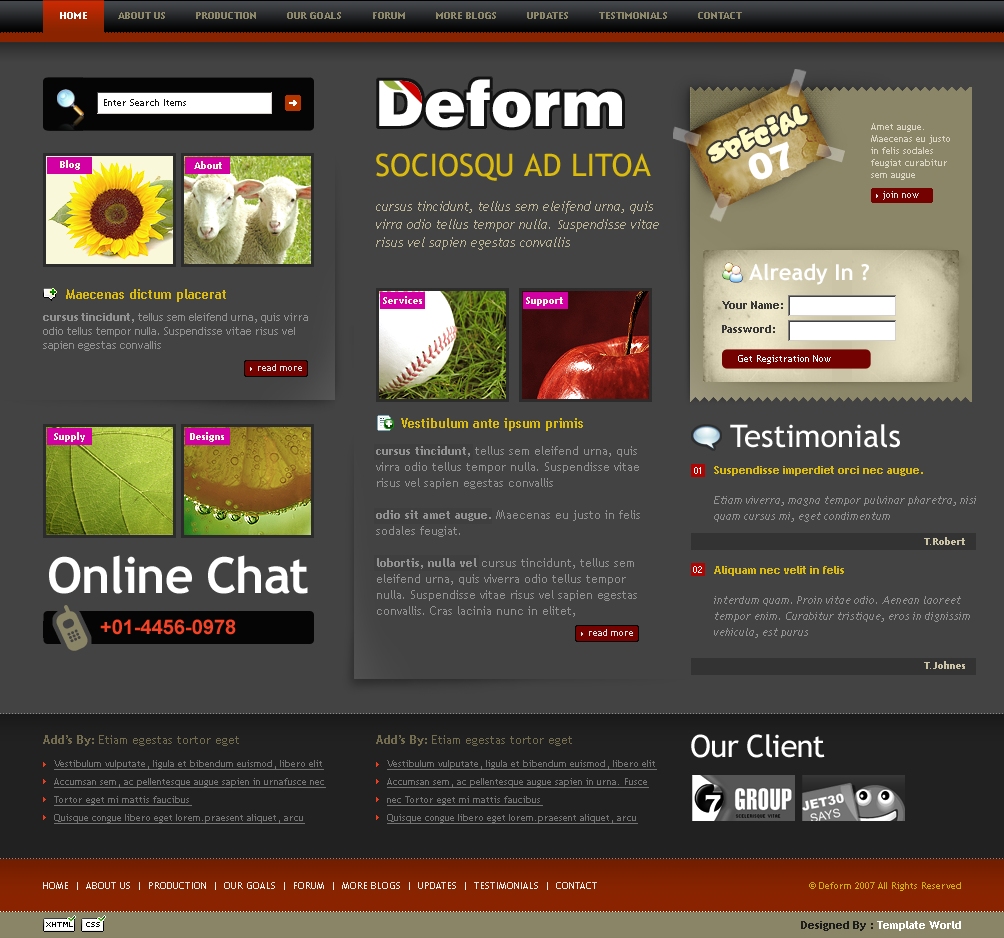
<style>
.page{position:relative;width:1004px;height:938px;background:#434343}
.page>*{position:absolute;margin:0}
.t1{font:10px "TrebuchetMS-Bold";color:#8d8769;text-transform:uppercase}
.t2{font:10px "TrebuchetMS-Bold";color:#ffffff;text-transform:uppercase}
.t3{font:63px "Swiss721BT-Black";color:#ffffff}
.t4{font:10px "TrebuchetMS";color:#101010}
.t5{font:24.2px "Vitamin";color:#fffcc6}
.t6{font:10px/12px "TrebuchetMS";color:#dad6c3}
.t7{font:36px "Swiss721BT-Black";color:#ffffff}
.t8{font:10px "TrebuchetMS-Bold";color:#f9f8da}
.t9{font:31px "TrebuchetMS";color:#dbbb0d;text-transform:uppercase}
.t10{font:9px "TrebuchetMS";color:#e5e5e5}
.t11{font:13px/18px "TrebuchetMS-Italic";color:#bdb698}
.t12{font:22px "TrebuchetMS-Bold";color:#ffffff}
.t13{font:13px "TrebuchetMS-Bold";color:#dbbb0d}
.t14{font:11px/12px "TrebuchetMS-Bold";color:#383838}
.t15{font:11px/14px "TrebuchetMS";color:#929292}
.t16{font:11px/14px "TrebuchetMS-Bold";color:#929292}
.t17{font:10px "TrebuchetMS";color:#ffffff}
.t18{font:31px "TrebuchetMS";color:#ffffff}
.t19{font:12px/16px "TrebuchetMS";color:#929292}
.t20{font:12px/16px "TrebuchetMS-Bold";color:#929292}
.t21{font:8px "Standard0757";color:#ffffff}
.t22{font:11px/16px "TrebuchetMS-Italic";color:#929292}
.t23{font:11px/14px "TrebuchetMS-Bold";color:#dbbb0d}
.t24{font:10px "TrebuchetMS-Bold";color:#c9c2a4}
.t25{font:50px "TrebuchetMS-Bold";letter-spacing:-0.025em;color:#ffffff}
.t26{font:50px "Cellpic";letter-spacing:-0.025em;color:#8b8567}
.t27{font:20px "Arial-BoldMT";color:#f64325}
.t28{font:12px "TrebuchetMS";color:#736c4e}
.t29{font:12px "TrebuchetMS-Bold";color:#736c4e}
.t30{font:31px "TrebuchetMS";letter-spacing:-0.025em;color:#ffffff}
.t31{font:10px/18px "TrebuchetMS";color:#747474;text-decoration:underline}
.t32{font:10px "TrebuchetMS";color:#efe9e7;text-transform:uppercase}
.t33{font:10px "TrebuchetMS";color:#dbbb0d}
</style>
<div class="page">
<p class="t1" style="left:60px;top:12px;width:682px;height:7px"><span class="t2">Home</span>          About Us          Production          Our Goals          Forum          More Blogs          Updates          Testimonials          Contact</p>
<p class="t3" style="left:379px;top:79px;width:243px;height:49px">Deform</p>
<p class="t4" style="left:104px;top:99px;width:82px;height:7px">Enter Search Items</p>
<p class="t5" style="left:708px;top:106px;width:100px;height:56px;rotate:-26deg">special</p>
<p class="t6" style="left:871px;top:123px;width:79px;height:57px">Amet augue. Maecenas eu justo in felis sodales feugiat curabitur sem augue</p>
<p class="t7" style="left:748px;top:141px;width:42px;height:39px;rotate:-21deg">07</p>
<p class="t8" style="left:60px;top:160px;width:20px;height:10px">Blog</p>
<p class="t8" style="left:194px;top:161px;width:28px;height:8px">About</p>
<p class="t9" style="left:376px;top:153px;width:275px;height:28px">sociosqu ad litoa</p>
<p class="t10" style="left:883px;top:191px;width:36px;height:9px">join now</p>
<p class="t11" style="left:376px;top:201px;width:283px;height:49px">cursus tincidunt, tellus sem eleifend urna, quis virra odio tellus tempor nulla. Suspendisse vitae risus vel sapien egestas convallis</p>
<p class="t12" style="left:749px;top:263px;width:120px;height:22px">Already In ?</p>
<p class="t13" style="left:66px;top:289px;width:160px;height:13px">Maecenas dictum placerat</p>
<p class="t8" style="left:383px;top:296px;width:39px;height:8px">Services</p>
<p class="t8" style="left:526px;top:297px;width:37px;height:9px">Support</p>
<p class="t14" style="left:722px;top:301px;width:61px;height:32px">Your Name:<br><br>Password:</p>
<p class="t15" style="left:43px;top:313px;width:265px;height:38px"><span class="t16">cursus tincidunt,</span> tellus sem eleifend urna, quis virra odio tellus tempor nulla. Suspendisse vitae risus vel sapien egestas convallis</p>
<p class="t10" style="left:258px;top:364px;width:44px;height:7px">read more</p>
<p class="t17" style="left:738px;top:355px;width:93px;height:9px">Get Registration Now</p>
<p class="t13" style="left:401px;top:418px;width:182px;height:13px">Vestibulum ante ipsum primis</p>
<p class="t18" style="left:730px;top:424px;width:170px;height:24px">Testimonials</p>
<p class="t8" style="left:54px;top:432px;width:31px;height:10px">Supply</p>
<p class="t8" style="left:190px;top:432px;width:34px;height:10px">Designs</p>
<p class="t19" style="left:376px;top:446px;width:264px;height:171px"><span class="t20">cursus tincidunt,</span> tellus sem eleifend urna, quis virra odio tellus tempor nulla. Suspendisse vitae risus vel sapien egestas convallis<br><span class="t20"><br>odio sit amet augue.</span> Maecenas eu justo in felis sodales feugiat.<br><br><span class="t20">lobortis, nulla vel </span>cursus tincidunt, tellus sem eleifend urna, quis viverra odio tellus tempor nulla. Suspendisse vitae risus vel sapien egestas convallis. Cras lacinia nunc in elitet,</p>
<p class="t21" style="left:694px;top:467px;width:7px;height:7px">01</p>
<p class="t22" style="left:714px;top:466px;width:262px;height:56px"><span class="t23">Suspendisse imperdiet orci nec augue.<br><br></span>Etiam viverra, magna tempor pulvinar pharetra, nisi quam cursus mi, eget condimentum</p>
<p class="t24" style="left:924px;top:537px;width:41px;height:8px">T.Robert</p>
<p class="t25" style="left:49px;top:555px;width:259px;height:39px">Online Chat</p>
<p class="t21" style="left:693px;top:566px;width:9px;height:7px">02</p>
<p class="t22" style="left:714px;top:566px;width:256px;height:72px"><span class="t23">Aliquam nec velit in felis<br><br></span>interdum quam. Proin vitae odio. Aenean laoreet tempor enim. Curabitur tristique, eros in dignissim vehicula, est purus</p>
<p class="t26" style="left:56px;top:605px;width:32px;height:46px;rotate:-25deg">b</p>
<p class="t27" style="left:100px;top:619px;width:136px;height:16px">+01-4456-0978</p>
<p class="t10" style="left:589px;top:629px;width:44px;height:7px">read more</p>
<p class="t24" style="left:924px;top:661px;width:41px;height:8px">T.Johnes</p>
<p class="t28" style="left:43px;top:735px;width:196px;height:11px"><span class="t29">Add’s By: </span>Etiam egestas tortor eget</p>
<p class="t28" style="left:376px;top:735px;width:196px;height:11px"><span class="t29">Add’s By: </span>Etiam egestas tortor eget</p>
<p class="t30" style="left:691px;top:734px;width:134px;height:24px">Our Client</p>
<p class="t31" style="left:54px;top:760px;width:272px;height:64px">Vestibulum vulputate, ligula et bibendum euismod, libero elit Accumsan sem, ac pellentesque augue sapien in urnafusce nec Tortor eget mi mattis faucibus<br>Quisque congue libero eget lorem.praesent aliquet, arcu</p>
<p class="t31" style="left:387px;top:760px;width:270px;height:64px">Vestibulum vulputate, ligula et bibendum euismod, libero elit Accumsan sem, ac pellentesque augue sapien in urna. Fusce nec Tortor eget mi mattis faucibus<br>Quisque congue libero eget lorem.praesent aliquet, arcu</p>
<p class="t32" style="left:43px;top:882px;width:554px;height:8px">Home  |  About Us  |  Production  |  Our Goals  |  Forum  |  More Blogs  |  Updates  |  Testimonials  |  Contact</p>
<p class="t33" style="left:809px;top:882px;width:152px;height:9px">© Deform 2007 All Rights Reserved</p>
</div>
